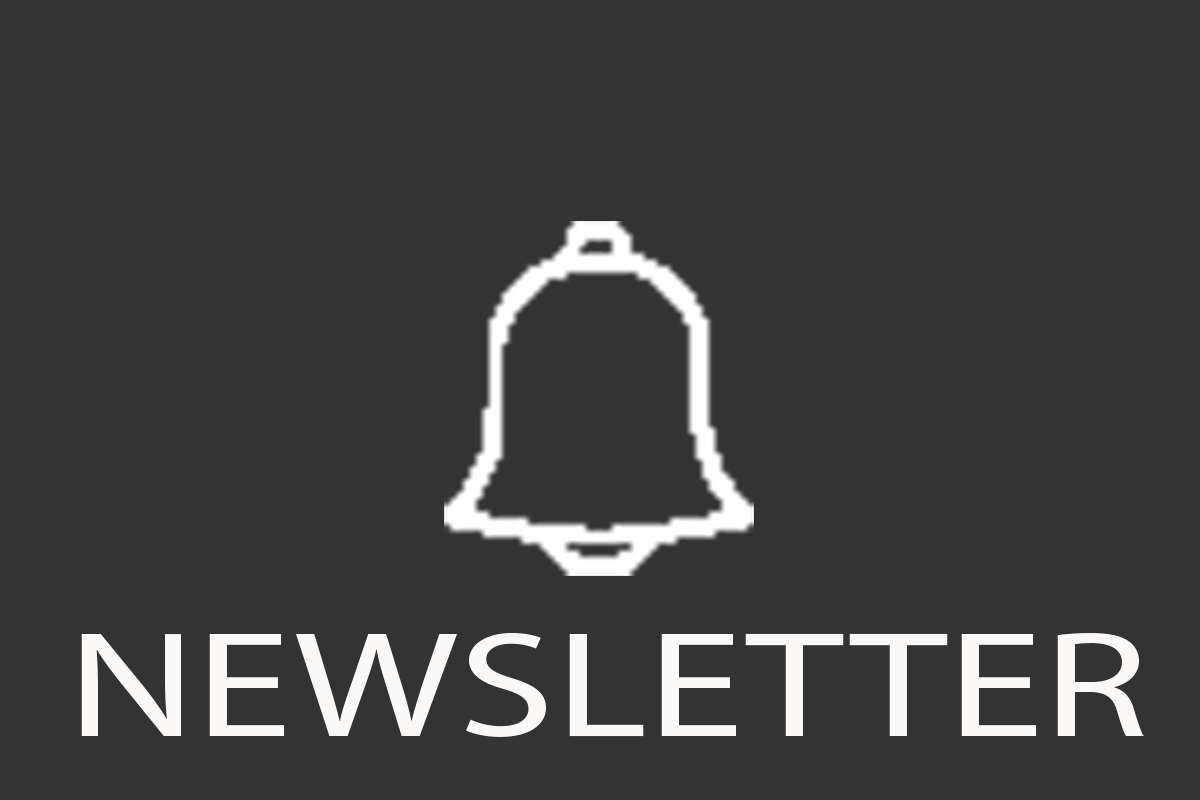
<style>
.page{position:relative;width:1200px;height:800px;background:#333333}
.page>*{position:absolute;margin:0}
.t1{font:150.6px "MyriadHebrew-Regular";color:#fbf8f8;scale:1.3 1}
</style>
<div class="page">
<p class="t1" style="left:81px;top:633px;width:1063px;height:104px">NEWSLETTER</p>
</div>
